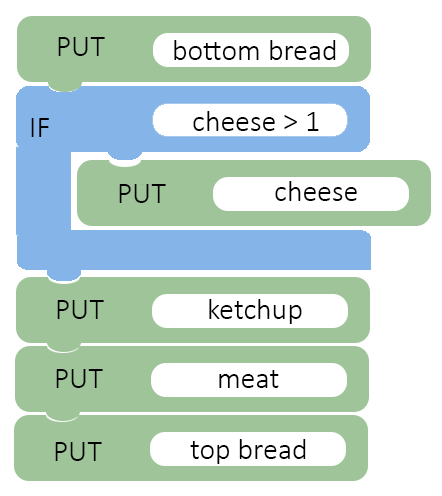
<style>
.page{position:relative;width:442px;height:496px;background:#ffffff}
.page>*{position:absolute;margin:0}
.t1{font:30px "Calibri-Light";color:#000000}
</style>
<div class="page">
<p class="t1" style="left:58px;top:37px;width:47px;height:19px">PUT</p>
<p class="t1" style="left:174px;top:40px;width:162px;height:20px">bottom bread</p>
<p class="t1" style="left:193px;top:111px;width:126px;height:20px">cheese &gt; 1</p>
<p class="t1" style="left:31px;top:118px;width:18px;height:19px">IF</p>
<p class="t1" style="left:119px;top:184px;width:47px;height:19px">PUT</p>
<p class="t1" style="left:275px;top:181px;width:82px;height:20px">cheese</p>
<p class="t1" style="left:57px;top:300px;width:47px;height:19px">PUT</p>
<p class="t1" style="left:209px;top:299px;width:93px;height:25px">ketchup</p>
<p class="t1" style="left:56px;top:369px;width:47px;height:19px">PUT</p>
<p class="t1" style="left:219px;top:370px;width:60px;height:18px">meat</p>
<p class="t1" style="left:55px;top:442px;width:47px;height:19px">PUT</p>
<p class="t1" style="left:190px;top:439px;width:116px;height:25px">top bread</p>
</div>
